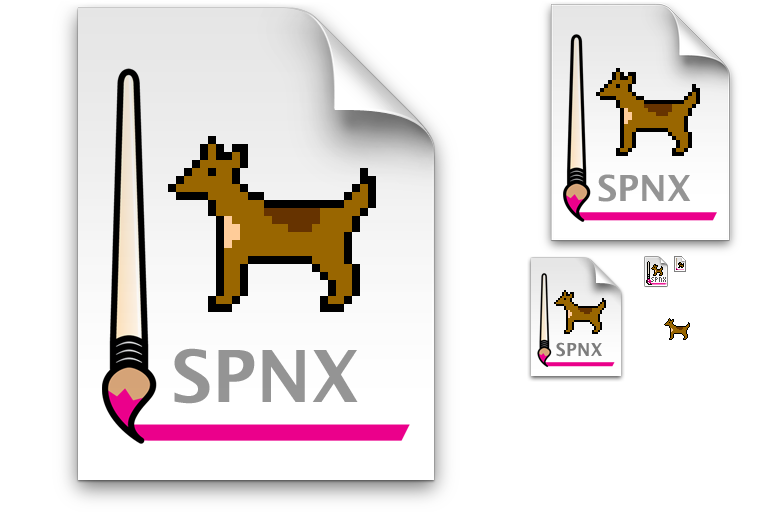
<style>
.page{position:relative;width:768px;height:512px;background:#ffffff}
.page>*{position:absolute;margin:0}
.t1{font:36px "LucidaGrande-Bold";color:#959595}
.t2{font:7px "KKFixed4x7";color:#555555}
.t3{font:18px "LucidaGrande-Bold";color:#7d7d7d}
.t4{font:72px "LucidaGrande-Bold";color:#959595}
</style>
<div class="page">
<p class="t1" style="left:598px;top:174px;width:93px;height:28px">SPNX</p>
<p class="t2" style="left:651px;top:277px;width:15px;height:5px">SPNX</p>
<p class="t3" style="left:556px;top:342px;width:46px;height:15px">SPNX</p>
<p class="t4" style="left:174px;top:348px;width:184px;height:56px">SPNX</p>
</div>
